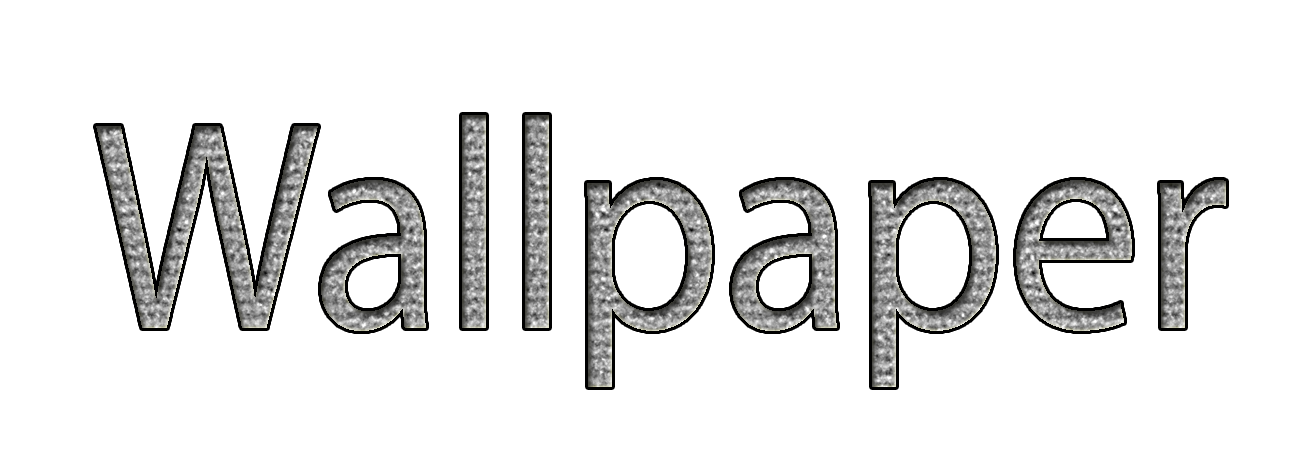
<style>
.page{position:relative;width:1316px;height:456px;background:#ffffff}
.page>*{position:absolute;margin:0}
.t1{font:300px "MyriadPro-Regular";scale:0.9 1}
</style>
<div class="page">
<p class="t1" style="left:96px;top:115px;width:1130px;height:272px">Wallpaper</p>
</div>
